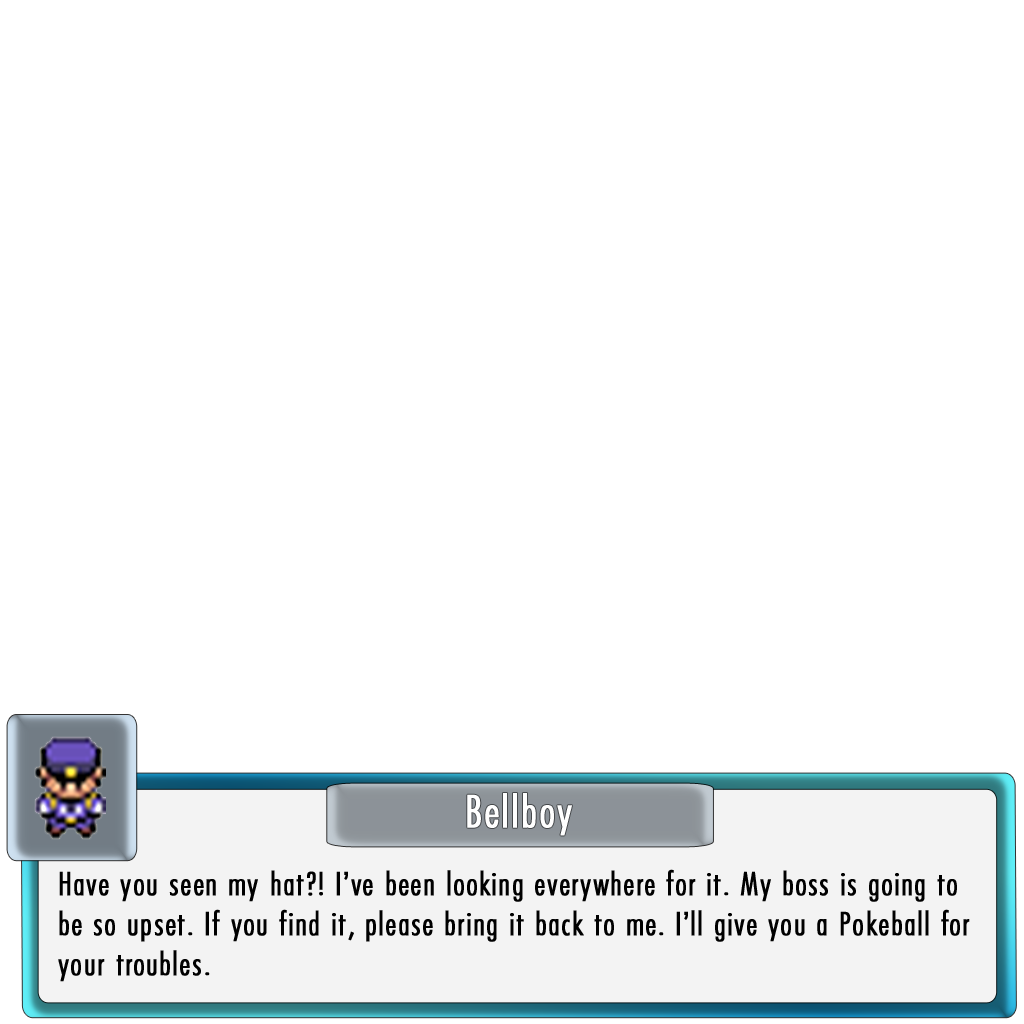
<style>
.page{position:relative;width:1024px;height:1024px;background:#ffffff}
.page>*{position:absolute;margin:0}
.t1{font:45.8px "FuturaCondensedBQ-Light";letter-spacing:0.035em;color:#ffffff;font-weight:bold}
.t2{font:33.3px "FuturaCondensedBQ-Light";letter-spacing:0.035em;color:#000000;font-weight:bold}
</style>
<div class="page">
<p class="t1" style="left:467px;top:793px;width:105px;height:43px">Bellboy</p>
<p class="t2" style="left:58px;top:869px;width:912px;height:113px">Have you seen my hat?! I’ve been looking everywhere for it. My boss is going to be so upset. If you find it, please bring it back to me. I’ll give you a Pokeball for your troubles.</p>
</div>
